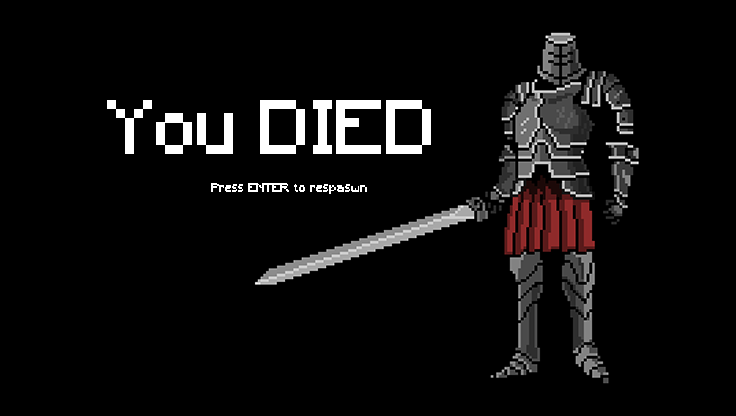
<style>
.page{position:relative;width:736px;height:416px;background:#000000}
.page>*{position:absolute;margin:0}
.t1{font:72px "Minecraft";color:#ffffff}
.t2{font:12px "Minecraft";color:#ffffff}
</style>
<div class="page">
<p class="t1" style="left:107px;top:100px;width:324px;height:54px">You DIED</p>
<p class="t2" style="left:211px;top:183px;width:156px;height:11px">Press ENTER to respaswn</p>
</div>
